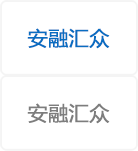
<style>
.page{position:relative;width:138px;height:151px;background:#ffffff}
.page>*{position:absolute;margin:0}
.t1{font:20px "MicrosoftYaHei";color:#096dc1;font-weight:bold}
.t2{font:20px "MicrosoftYaHei";color:#7d7d7d;font-weight:bold}
</style>
<div class="page">
<p class="t1" style="left:27px;top:28px;width:83px;height:21px">安融汇众</p>
<p class="t2" style="left:27px;top:103px;width:83px;height:21px">安融汇众</p>
</div>
